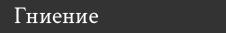
<style>
.page{position:relative;width:226px;height:33px;background:#333333}
.page>*{position:absolute;margin:0}
.t1{font:24px "CrimsonText-Regular";color:#ffffff}
</style>
<div class="page">
<p class="t1" style="left:14px;top:7px;width:85px;height:17px">Гниение</p>
</div>
